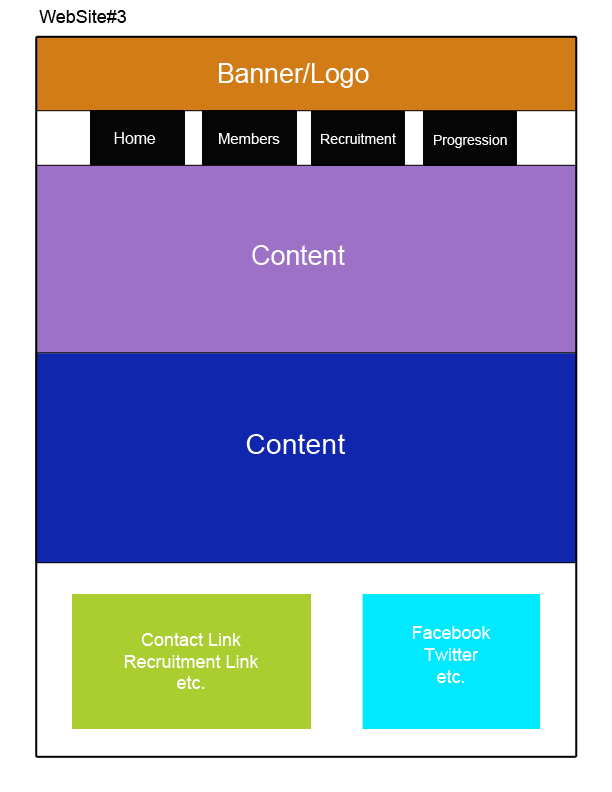
<style>
.page{position:relative;width:612px;height:792px;background:#ffffff}
.page>*{position:absolute;margin:0}
.t1{font:18px "ArialMT";color:#000000}
.t2{font:26.6px "ArialMT";color:#ffffff}
.t3{font:15.8px "ArialMT";color:#fffefe}
.t4{font:14.8px "ArialMT";color:#fffefe}
.t5{font:14.1px "ArialMT";color:#fffefe}
.t6{font:14px "ArialMT";color:#fffefe}
.t7{font:26.9px "ArialMT";color:#ffffff}
.t8{font:28.4px "ArialMT";color:#ffffff}
.t9{font:18px "ArialMT";color:#ffffff}
</style>
<div class="page">
<p class="t1" style="left:39px;top:10px;width:87px;height:13px">WebSite#3</p>
<p class="t2" style="left:219px;top:63px;width:150px;height:25px">Banner/Logo</p>
<p class="t3" style="left:114px;top:132px;width:42px;height:12px">Home</p>
<p class="t4" style="left:219px;top:133px;width:61px;height:11px">Members</p>
<p class="t5" style="left:321px;top:133px;width:75px;height:11px">Recruitment</p>
<p class="t6" style="left:434px;top:135px;width:73px;height:13px">Progression</p>
<p class="t7" style="left:252px;top:245px;width:93px;height:20px">Content</p>
<p class="t8" style="left:246px;top:434px;width:99px;height:20px">Content</p>
<p class="t9" style="left:412px;top:626px;width:79px;height:57px;text-align:center">Facebook<br>Twitter<br>etc.</p>
<p class="t9" style="left:124px;top:633px;width:135px;height:56px;text-align:center">Contact Link<br>Recruitment Link<br>etc.</p>
</div>
